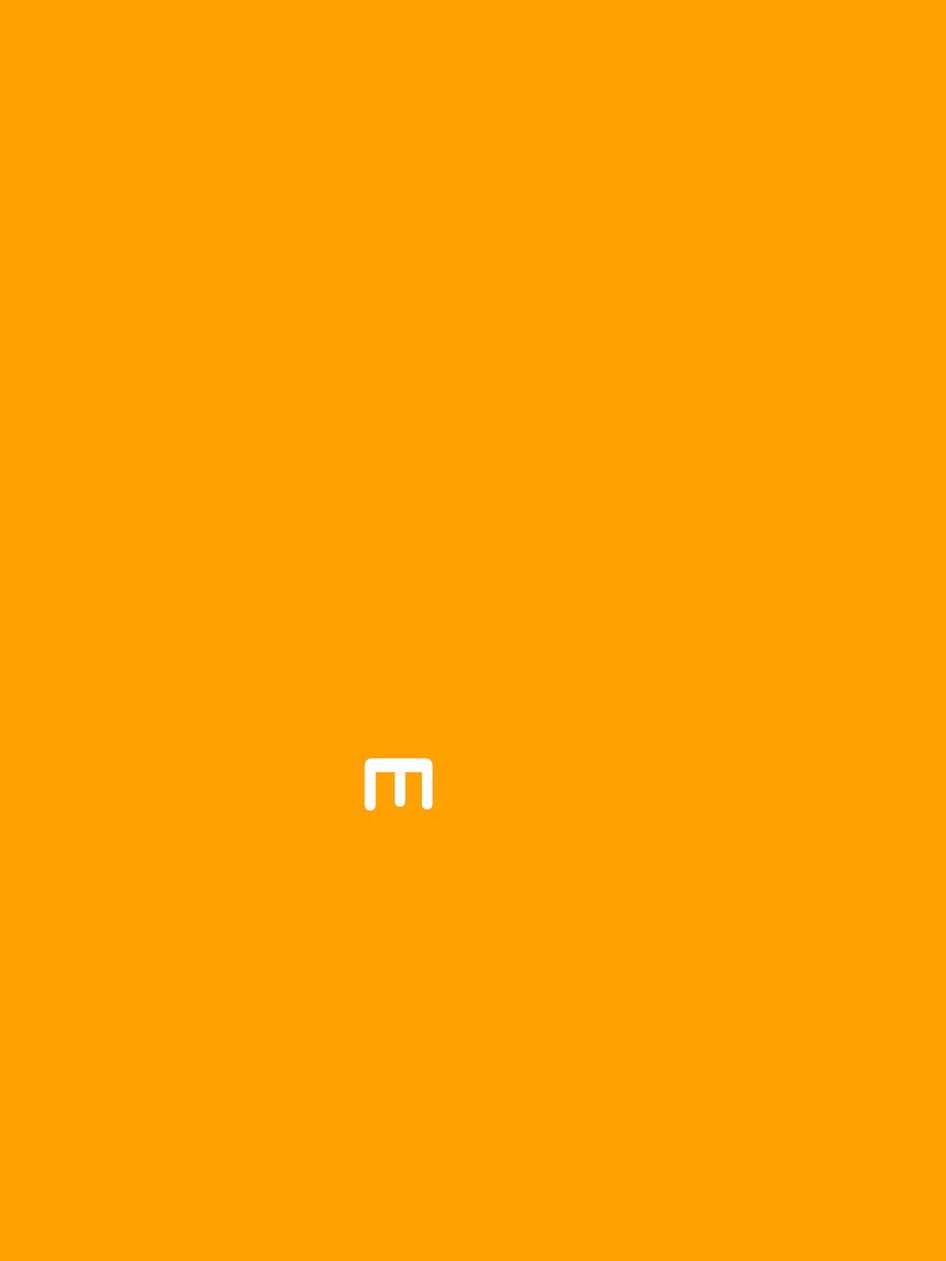
<style>
.page{position:relative;width:946px;height:1261px;background:#ffa100}
.page>*{position:absolute;margin:0}
.t1{font:94.6px "ArialRoundedMTBold";color:#ffffff}
</style>
<div class="page">
<p class="t1" style="left:364px;top:758px;width:68px;height:53px;rotate:90deg">E</p>
</div>
